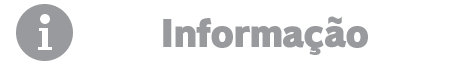
<style>
.page{position:relative;width:464px;height:66px;background:#ffffff}
.page>*{position:absolute;margin:0}
.t1{font:36px "RodinPro-UB";letter-spacing:-0.039em;color:#989a9d}
</style>
<div class="page">
<p class="t1" style="left:163px;top:16px;width:205px;height:39px">Informação</p>
</div>
